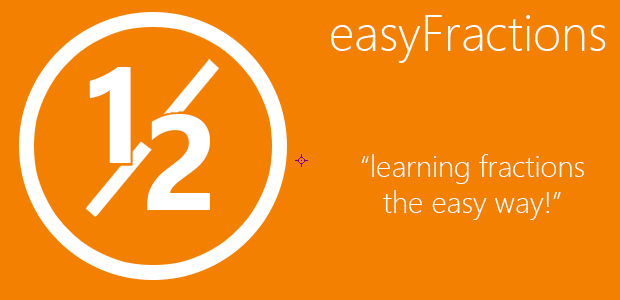
<style>
.page{position:relative;width:620px;height:300px;background:#f38000}
.page>*{position:absolute;margin:0}
.t1{font:50px "SegoeUI-Light";color:#ffffff}
.t2{font:134.3px "SegoeUI-Bold";color:#ffffff}
.t3{font:30px "SegoeUI-Light";color:#ffffff}
</style>
<div class="page">
<p class="t1" style="left:331px;top:15px;width:275px;height:48px">easyFractions</p>
<p class="t2" style="left:89px;top:67px;width:42px;height:96px">1</p>
<p class="t2" style="left:147px;top:114px;width:63px;height:96px">2</p>
<p class="t3" style="left:361px;top:154px;width:223px;height:66px;text-align:center">“learning fractions the easy way!”</p>
</div>
